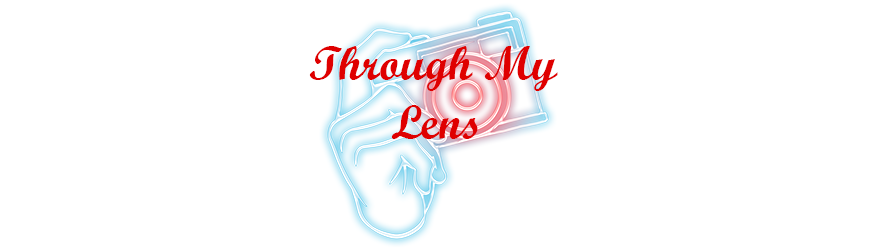
<style>
.page{position:relative;width:876px;height:250px;background:#ffffff}
.page>*{position:absolute;margin:0}
.t1{font:48px "ScriptMTBold";color:#df0000}
</style>
<div class="page">
<p class="t1" style="left:309px;top:46px;width:249px;height:45px">Through My</p>
<p class="t1" style="left:391px;top:105px;width:87px;height:34px">Lens</p>
</div>
